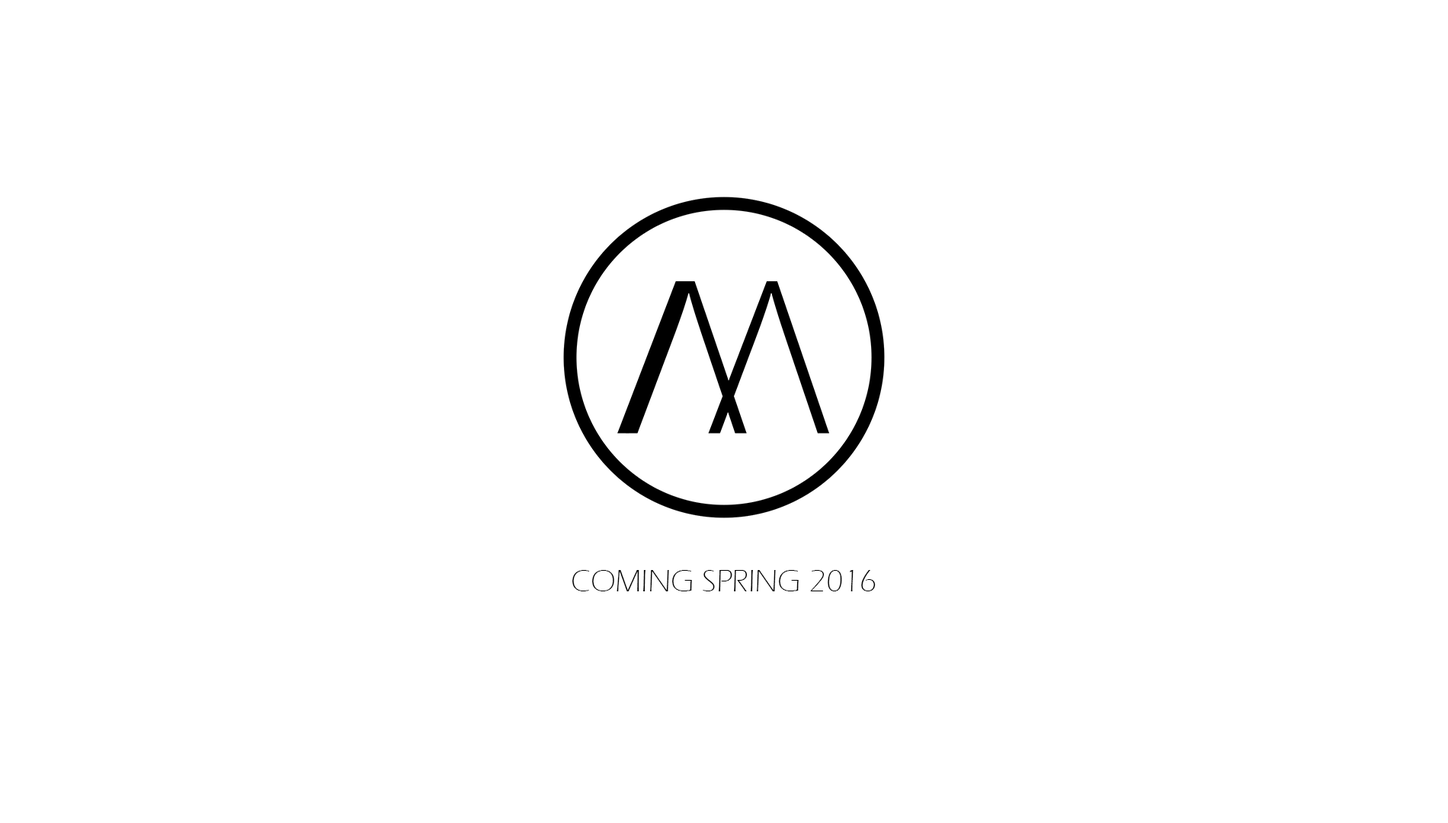
<style>
.page{position:relative;width:1448px;height:823px;background:#ffffff}
.page>*{position:absolute;margin:0}
.t1{font:31.8px "ErasITC-Light";color:#000000;text-transform:uppercase}
</style>
<div class="page">
<p class="t1" style="left:572px;top:570px;width:304px;height:22px">Coming Spring 2016</p>
</div>
